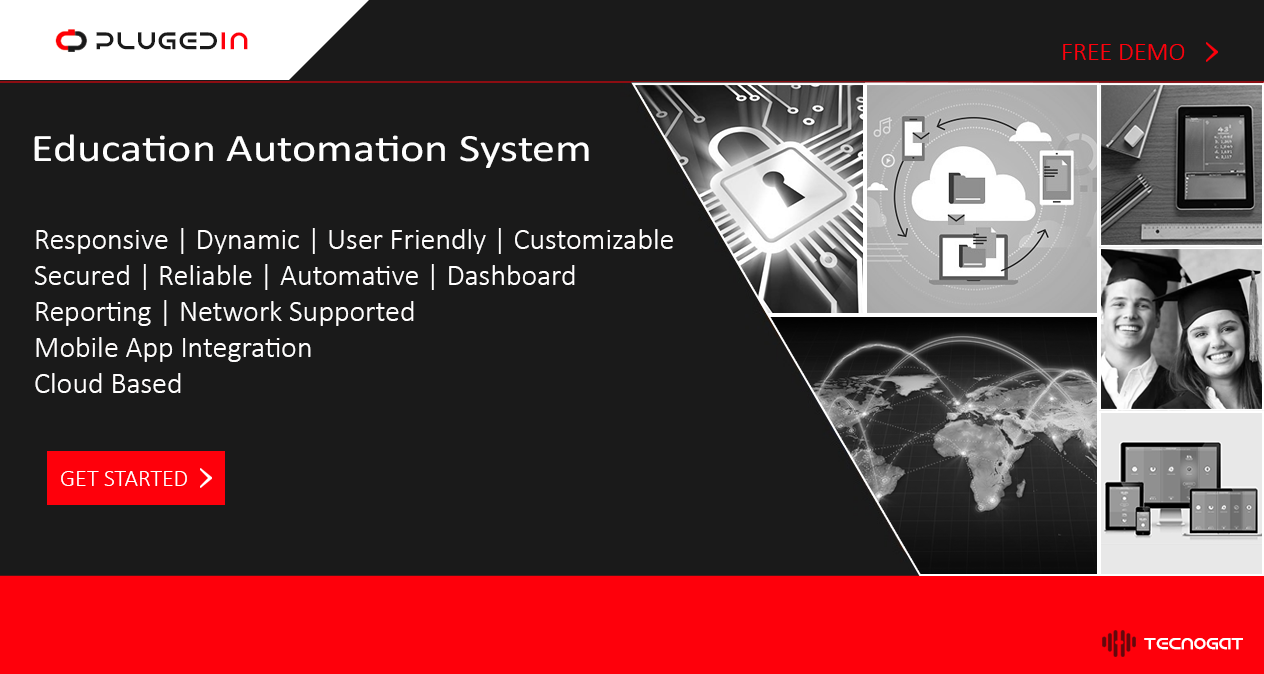
<style>
.page{position:relative;width:1264px;height:674px;background:#1a1a1a}
.page>*{position:absolute;margin:0}
.t1{font:24px "Android";letter-spacing:0.08em;color:#1a1a1a}
.t2{font:24px "Android";letter-spacing:0.16em;color:#fe000b}
.t3{font:26px "Calibri-Light";color:#fe000b;text-transform:uppercase}
.t4{font:39.1px "Calibri";color:#ffffff;scale:1.18 1}
.t5{font:30px "Calibri-Light";color:#fffefe}
.t6{font:24px "Calibri-Light";color:#ffffff;text-transform:uppercase}
.t7{font:16px "Android";color:#ffffff}
</style>
<div class="page">
<p class="t1" style="left:96px;top:32px;width:121px;height:18px">pluged</p>
<p class="t2" style="left:221px;top:32px;width:27px;height:18px">in</p>
<p class="t3" style="left:1063px;top:44px;width:122px;height:16px">free demo</p>
<p class="t4" style="left:34px;top:134px;width:555px;height:34px">Education Automation System</p>
<p class="t5" style="left:35px;top:228px;width:638px;height:165px">Responsive | Dynamic | User Friendly | Customizable<br>Secured | Reliable | Automative | Dashboard<br>Reporting | Network Supported<br>Mobile App Integration<br>Cloud Based</p>
<p class="t6" style="left:61px;top:471px;width:126px;height:15px">Get started</p>
<p class="t7" style="left:1144px;top:638px;width:99px;height:12px">Tecnogat</p>
</div>
